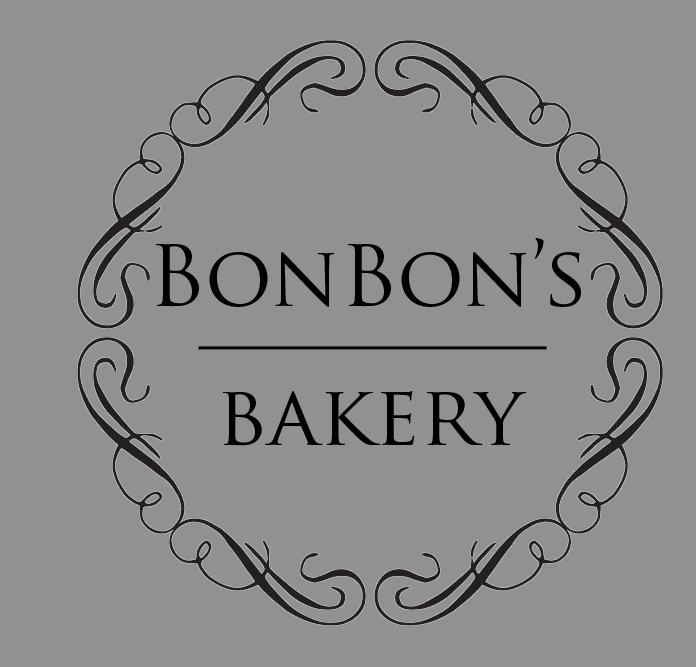
<style>
.page{position:relative;width:696px;height:667px;background:#919191}
.page>*{position:absolute;margin:0}
.t1{font:83.3px "TrajanPro-Regular";color:#000000}
</style>
<div class="page">
<p class="t1" style="left:155px;top:238px;width:426px;height:69px">BonBon’s</p>
<p class="t1" style="left:222px;top:391px;width:305px;height:55px">bakery</p>
</div>
